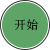
<style>
.page{position:relative;width:50px;height:50px;background:#5ea466}
.page>*{position:absolute;margin:0}
.t1{font:12px "NSimSun"}
</style>
<div class="page">
<p class="t1" style="left:14px;top:19px;width:24px;height:12px">开始</p>
</div>
